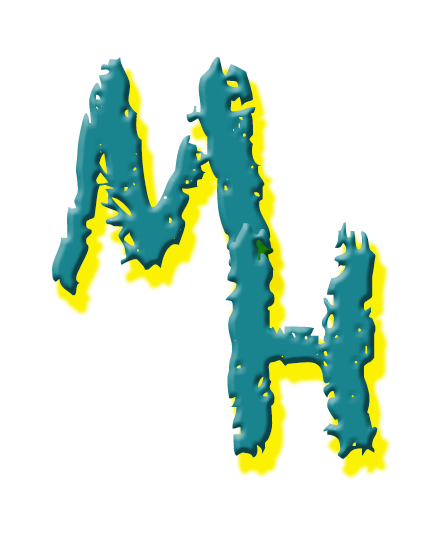
<style>
.page{position:relative;width:444px;height:534px;background:#ffffff}
.page>*{position:absolute;margin:0}
.t1{font:300px "Chalkduster";color:#19848e}
</style>
<div class="page">
<p class="t1" style="left:52px;top:57px;width:222px;height:239px">M</p>
<p class="t1" style="left:225px;top:222px;width:153px;height:237px">H</p>
</div>
